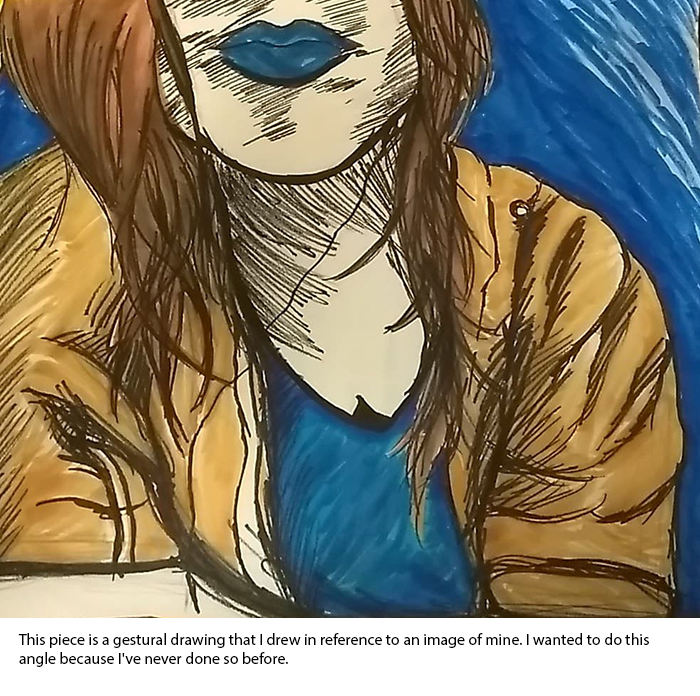
<style>
.page{position:relative;width:700px;height:696px}
.page>*{position:absolute;margin:0}
.t1{font:16px "MyriadPro-Regular";color:#000000}
</style>
<div class="page">
<p class="t1" style="left:18px;top:633px;width:631px;height:34px">This piece is a gestural drawing that I drew in reference to an image of mine. I wanted to do this angle because I've never done so before.</p>
</div>
